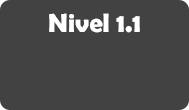
<style>
.page{position:relative;width:189px;height:110px;background:#424242}
.page>*{position:absolute;margin:0}
.t1{font:26.5px "BerlinSansFBDemi-Bold";color:#ffffff}
</style>
<div class="page">
<p class="t1" style="left:49px;top:13px;width:91px;height:20px">Nivel 1.1</p>
</div>
